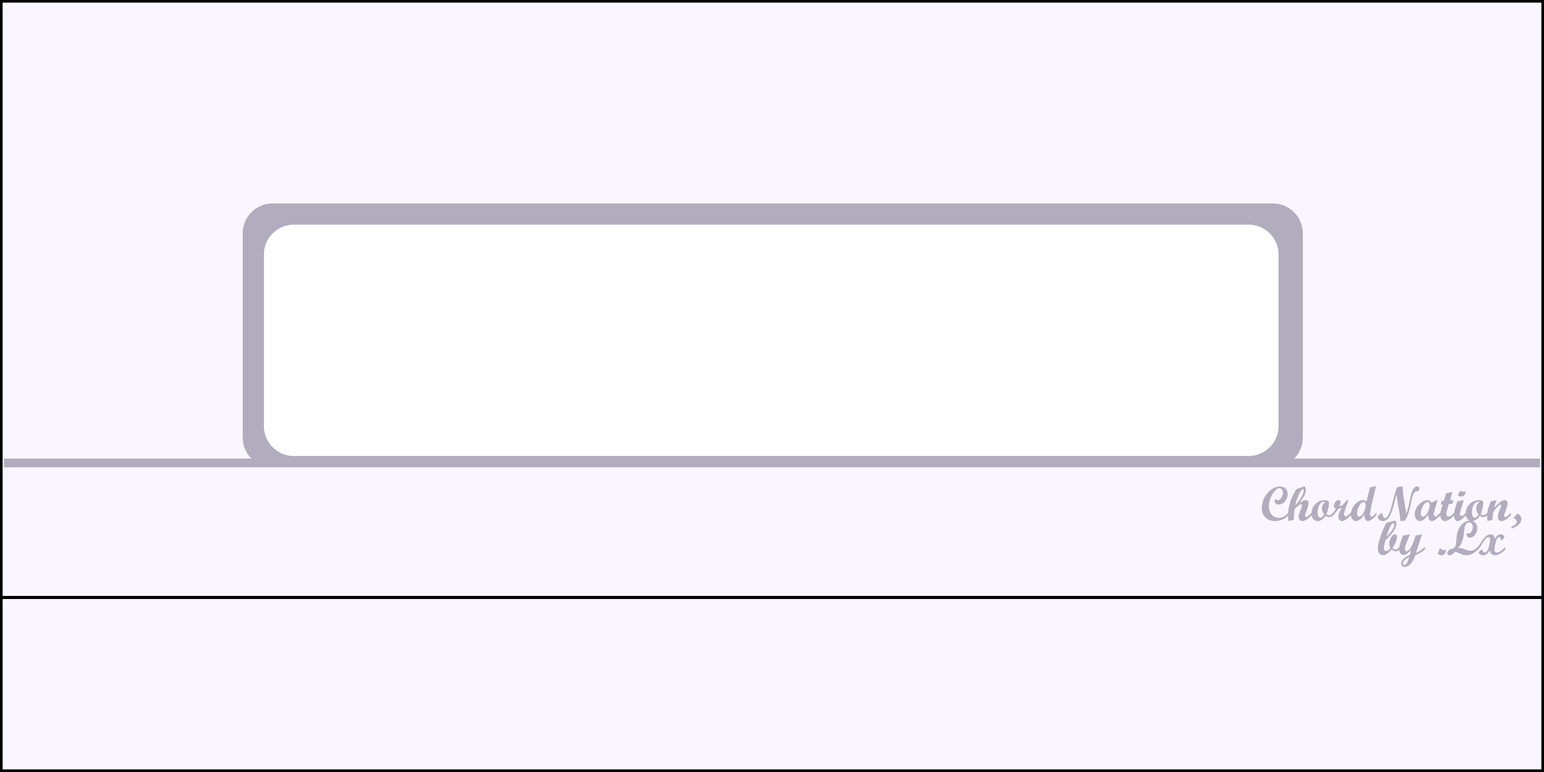
<style>
.page{position:relative;width:1544px;height:772px;background:#f9f6ff}
.page>*{position:absolute;margin:0}
.t1{font:48.9px/11.4px "ScriptMTBold";color:#b1acbe}
</style>
<div class="page">
<p class="t1" style="left:1262px;top:487px;width:260px;height:80px">ChordNation,<br><br>  <br>    by .Lx</p>
</div>
